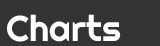
<style>
.page{position:relative;width:160px;height:46px;background:#333333}
.page>*{position:absolute;margin:0}
.t1{font:36px "Righteous-Regular";color:#ffffff}
</style>
<div class="page">
<p class="t1" style="left:7px;top:14px;width:114px;height:28px">Charts</p>
</div>
